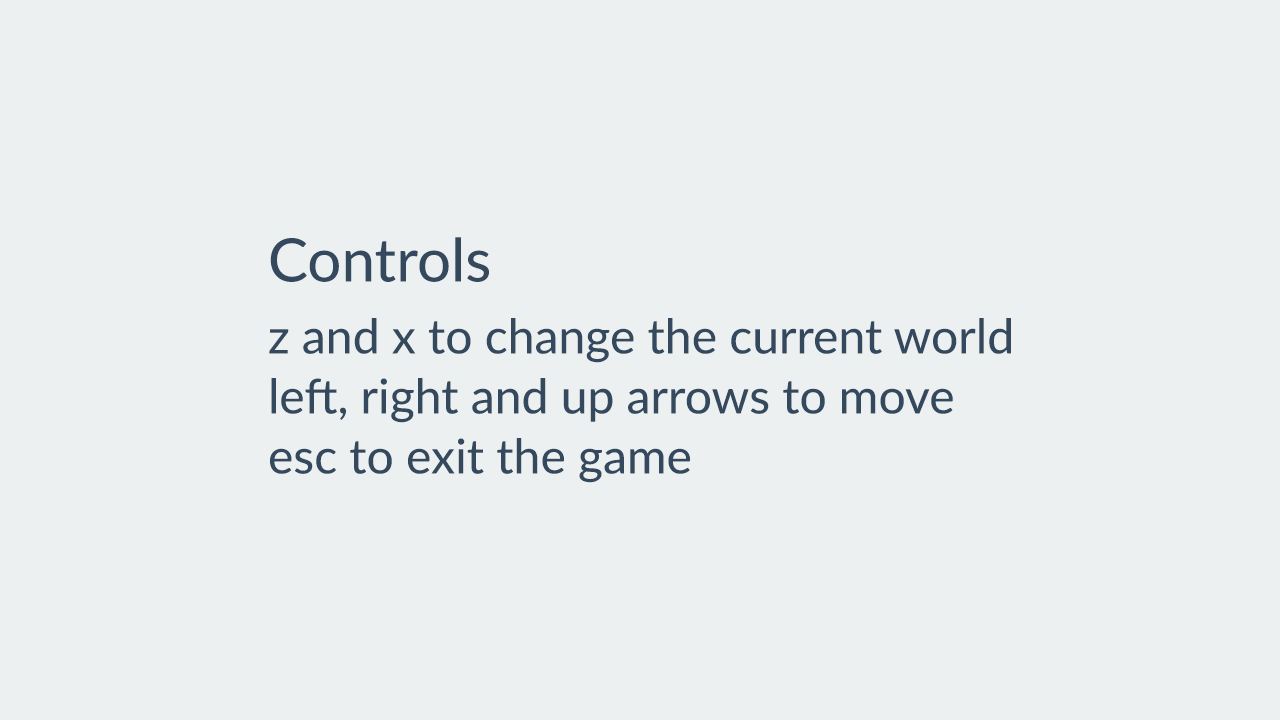
<style>
.page{position:relative;width:1280px;height:720px;background:#ecf0f1}
.page>*{position:absolute;margin:0}
.t1{font:48px/60px "Lato-Medium";color:#34495e}
.t2{font:60px/96px "Lato-Medium";color:#34495e}
.t3{font:48px/72px "Lato-Medium";color:#34495e}
</style>
<div class="page">
<p class="t1" style="left:269px;top:237px;width:742px;height:246px"><span class="t2">Controls<br></span><span class="t3">z and x to change the current world<br></span>left, right and up arrows to move<br>esc to exit the game</p>
</div>
